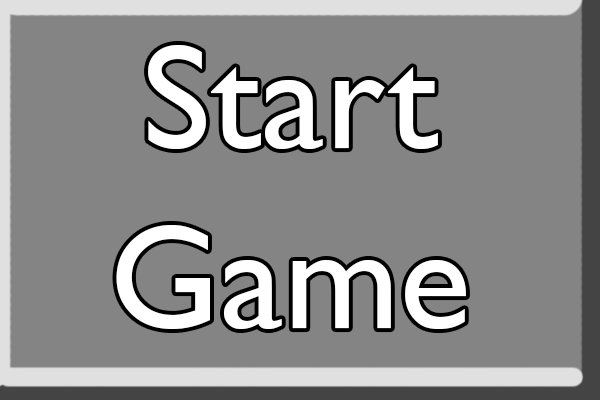
<style>
.page{position:relative;width:600px;height:400px;background:#848484}
.page>*{position:absolute;margin:0}
.t1{font:150px "GillSansMT";color:#ffffff}
</style>
<div class="page">
<p class="t1" style="left:116px;top:45px;width:350px;height:284px;text-align:center">Start<br>Game</p>
</div>
